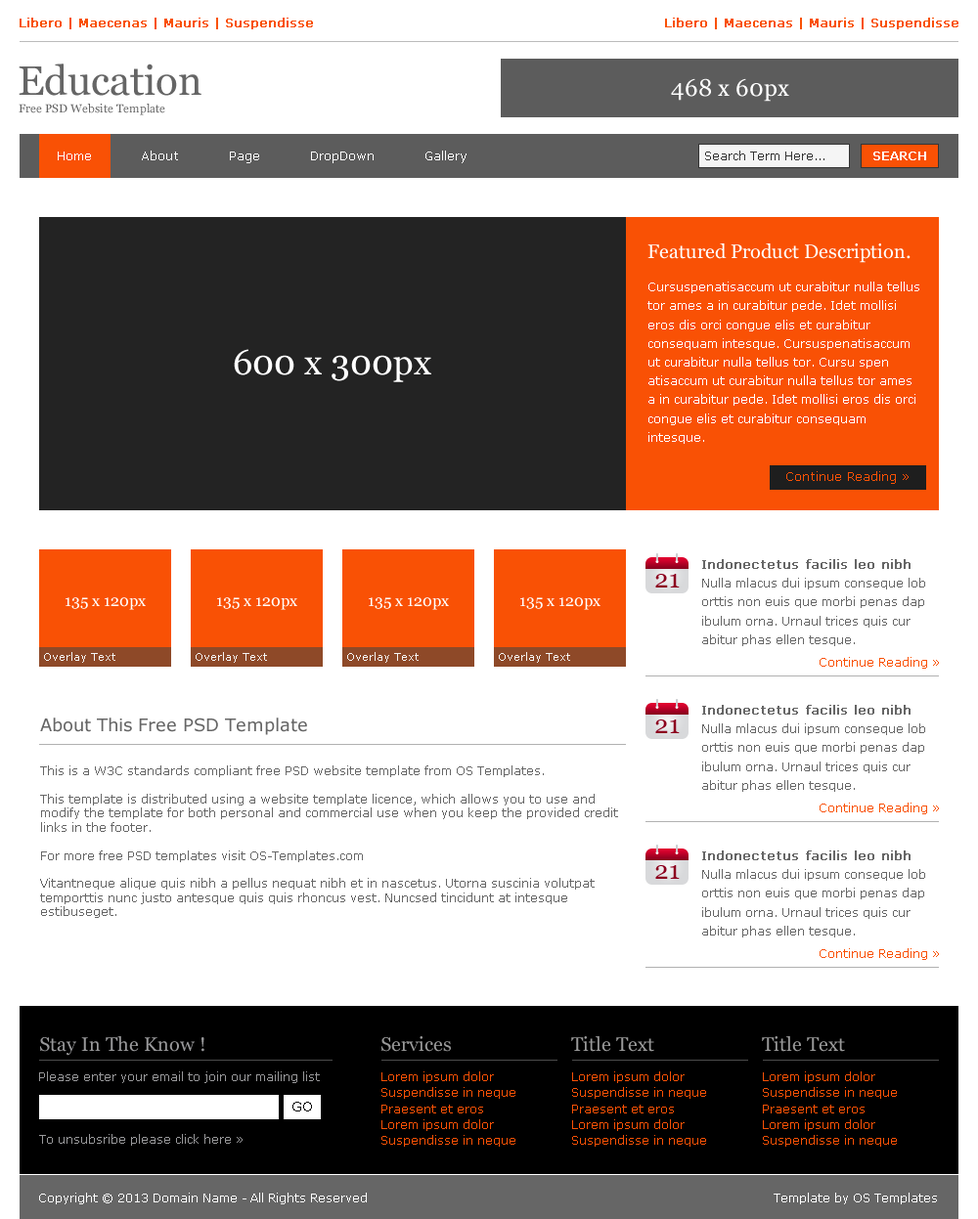
<style>
.page{position:relative;width:978px;height:1219px;background:#ffffff}
.page>*{position:absolute;margin:0}
.t1{font:11.7px "Verdana";color:#f95105;font-weight:bold}
.t2{font:41.1px "Georgia";color:#656565}
.t3{font:23.5px "Georgia";color:#ffffff}
.t4{font:11.7px "Georgia";color:#656565}
.t5{font:12.7px "Verdana";color:#ffffff}
.t6{font:11.7px "Verdana";color:#333333}
.t7{font:11.7px "Verdana";color:#ffffff;font-weight:bold}
.t8{font:19.6px "Georgia";color:#ffffff}
.t9{font:11.7px/18.8px "Verdana";color:#ffffff}
.t10{font:35.2px "Georgia";color:#ffffff}
.t11{font:12.7px "Verdana";color:#f95105}
.t12{font:12.7px "Verdana";color:#666666;font-weight:bold}
.t13{font:25.4px "Georgia";color:#8c001e}
.t14{font:11.7px/18.8px "Verdana";color:#666666}
.t15{font:15.6px "Georgia";color:#ffffff}
.t16{font:10.8px "Verdana";color:#f4f4f4}
.t17{font:11.7px "Verdana";color:#f95105}
.t18{font:17.6px "Verdana";color:#666666}
.t19{font:11.7px/14.1px "Verdana";color:#666666}
.t20{font:19.6px "Georgia";color:#98989a}
.t21{font:19.6px "Georgia";color:#999999}
.t22{font:11.7px "Verdana";color:#98989a}
.t23{font:11.7px/16px "Verdana";color:#f95105}
.t24{font:13.7px "Verdana";color:#000000}
.t25{font:11.7px "Verdana";color:#ffffff}
</style>
<div class="page">
<p class="t1" style="left:20px;top:18px;width:293px;height:11px">Libero | Maecenas | Mauris | Suspendisse</p>
<p class="t1" style="left:665px;top:18px;width:293px;height:11px">Libero | Maecenas | Mauris | Suspendisse</p>
<p class="t2" style="left:19px;top:64px;width:182px;height:32px">Education</p>
<p class="t3" style="left:671px;top:78px;width:118px;height:24px">468 x 60px</p>
<p class="t4" style="left:19px;top:104px;width:146px;height:11px">Free PSD Website Template</p>
<p class="t5" style="left:58px;top:152px;width:33px;height:8px">Home</p>
<p class="t5" style="left:142px;top:151px;width:36px;height:9px">About</p>
<p class="t5" style="left:230px;top:152px;width:29px;height:11px">Page</p>
<p class="t5" style="left:311px;top:152px;width:63px;height:11px">DropDown</p>
<p class="t5" style="left:425px;top:151px;width:41px;height:12px">Gallery</p>
<p class="t6" style="left:705px;top:151px;width:119px;height:9px">Search Term Here...</p>
<p class="t7" style="left:873px;top:152px;width:53px;height:8px">SEARCH</p>
<p class="t8" style="left:647px;top:243px;width:263px;height:20px">Featured Product Description.</p>
<p class="t9" style="left:647px;top:282px;width:272px;height:162px">Cursuspenatisaccum ut curabitur nulla tellus tor ames a in curabitur pede. Idet mollisi eros dis orci congue elis et curabitur consequam intesque. Cursuspenatisaccum ut curabitur nulla tellus tor. Cursu spen atisaccum ut curabitur nulla tellus tor ames a in curabitur pede. Idet mollisi eros dis orci congue elis et curabitur consequam intesque.</p>
<p class="t10" style="left:234px;top:349px;width:197px;height:33px">600 x 300px</p>
<p class="t11" style="left:786px;top:471px;width:122px;height:13px">Continue Reading »</p>
<p class="t12" style="left:702px;top:559px;width:208px;height:10px">Indonectetus facilis leo nibh</p>
<p class="t13" style="left:655px;top:574px;width:25px;height:14px">21</p>
<p class="t14" style="left:702px;top:578px;width:223px;height:68px">Nulla mlacus dui ipsum conseque lob orttis non euis que morbi penas dap ibulum orna. Urnaul trices quis cur abitur phas ellen tesque.</p>
<p class="t15" style="left:66px;top:597px;width:80px;height:13px">135 x 120px</p>
<p class="t15" style="left:217px;top:597px;width:80px;height:13px">135 x 120px</p>
<p class="t15" style="left:369px;top:597px;width:80px;height:13px">135 x 120px</p>
<p class="t15" style="left:520px;top:597px;width:80px;height:13px">135 x 120px</p>
<p class="t16" style="left:44px;top:652px;width:71px;height:11px">Overlay Text</p>
<p class="t16" style="left:196px;top:652px;width:71px;height:11px">Overlay Text</p>
<p class="t16" style="left:347px;top:652px;width:72px;height:11px">Overlay Text</p>
<p class="t16" style="left:499px;top:652px;width:71px;height:11px">Overlay Text</p>
<p class="t17" style="left:819px;top:657px;width:120px;height:12px">Continue Reading »</p>
<p class="t12" style="left:702px;top:705px;width:208px;height:10px">Indonectetus facilis leo nibh</p>
<p class="t18" style="left:40px;top:718px;width:267px;height:17px">About This Free PSD Template</p>
<p class="t13" style="left:655px;top:720px;width:25px;height:13px">21</p>
<p class="t14" style="left:702px;top:724px;width:223px;height:68px">Nulla mlacus dui ipsum conseque lob orttis non euis que morbi penas dap ibulum orna. Urnaul trices quis cur abitur phas ellen tesque.</p>
<p class="t19" style="left:40px;top:766px;width:578px;height:152px">This is a W3C standards compliant free PSD website template from OS Templates. <br><br>This template is distributed using a website template licence, which allows you to use and modify the template for both personal and commercial use when you keep the provided credit links in the footer.<br><br>For more free PSD templates visit OS-Templates.com<br><br>Vitantneque alique quis nibh a pellus nequat nibh et in nascetus. Utorna suscinia volutpat temporttis nunc justo antesque quis quis rhoncus vest. Nuncsed tincidunt at intesque estibuseget.</p>
<p class="t17" style="left:819px;top:803px;width:120px;height:12px">Continue Reading »</p>
<p class="t12" style="left:702px;top:851px;width:208px;height:10px">Indonectetus facilis leo nibh</p>
<p class="t13" style="left:655px;top:865px;width:25px;height:14px">21</p>
<p class="t14" style="left:702px;top:869px;width:223px;height:69px">Nulla mlacus dui ipsum conseque lob orttis non euis que morbi penas dap ibulum orna. Urnaul trices quis cur abitur phas ellen tesque.</p>
<p class="t17" style="left:819px;top:949px;width:120px;height:11px">Continue Reading »</p>
<p class="t20" style="left:40px;top:1037px;width:164px;height:19px">Stay In The Know !</p>
<p class="t21" style="left:381px;top:1037px;width:70px;height:15px">Services</p>
<p class="t21" style="left:571px;top:1037px;width:83px;height:15px">Title Text</p>
<p class="t21" style="left:762px;top:1037px;width:83px;height:15px">Title Text</p>
<p class="t22" style="left:39px;top:1072px;width:281px;height:11px">Please enter your email to join our mailing list</p>
<p class="t23" style="left:381px;top:1072px;width:134px;height:75px">Lorem ipsum dolor<br>Suspendisse in neque<br>Praesent et eros<br>Lorem ipsum dolor<br>Suspendisse in neque</p>
<p class="t23" style="left:572px;top:1072px;width:134px;height:75px">Lorem ipsum dolor<br>Suspendisse in neque<br>Praesent et eros<br>Lorem ipsum dolor<br>Suspendisse in neque</p>
<p class="t23" style="left:763px;top:1072px;width:134px;height:75px">Lorem ipsum dolor<br>Suspendisse in neque<br>Praesent et eros<br>Lorem ipsum dolor<br>Suspendisse in neque</p>
<p class="t24" style="left:292px;top:1102px;width:20px;height:10px">GO</p>
<p class="t22" style="left:39px;top:1134px;width:204px;height:12px">To unsubsribe please click here »</p>
<p class="t25" style="left:39px;top:1193px;width:328px;height:12px">Copyright © 2013 Domain Name - All Rights Reserved</p>
<p class="t25" style="left:773px;top:1193px;width:164px;height:12px">Template by OS Templates</p>
</div>
